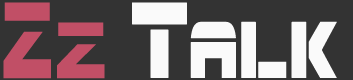
<style>
.page{position:relative;width:353px;height:80px;background:#333333}
.page>*{position:absolute;margin:0}
.t1{font:108px "PlanetEarth";letter-spacing:0.05em;color:#c14f66;scale:0.5 1}
.t2{font:79.2px "PlanetEarth";letter-spacing:0.05em;color:#c14f66;scale:0.68 1}
.t3{font:80px "Spac3tech";letter-spacing:0.05em;color:#fafafa;scale:0.7 1}
.t4{font:107.8px "Spac3tech";letter-spacing:0.01em;color:#fafafa;scale:0.64 1}
</style>
<div class="page">
<p class="t1" style="left:3px;top:2px;width:102px;height:77px">Z<span class="t2">z</span></p>
<p class="t3" style="left:132px;top:2px;width:205px;height:76px"><span class="t4">t</span>alk</p>
</div>
